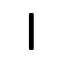
<style>
.page{position:relative;width:64px;height:64px;background:#ffffff}
.page>*{position:absolute;margin:0}
.t1{font:58.3px "Calibri";color:#000000}
</style>
<div class="page">
<p class="t1" style="left:28px;top:13px;width:6px;height:37px">І</p>
</div>
